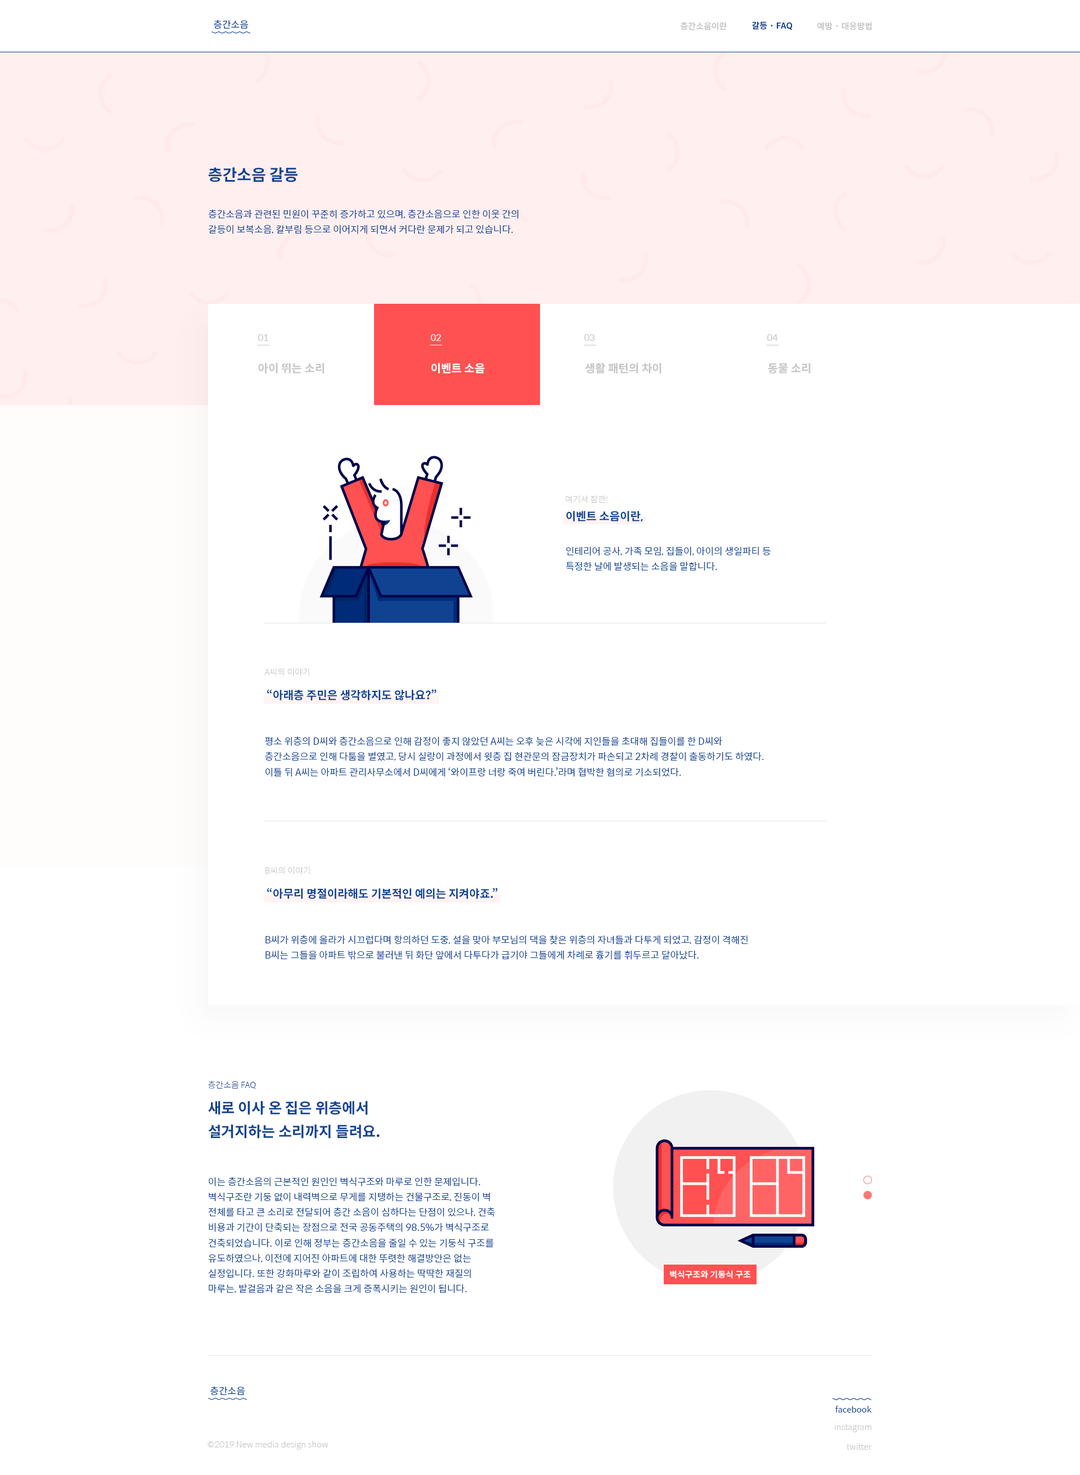
<style>
.page{position:relative;width:1080px;height:1475px;background:#ffffff}
.page>*{position:absolute;margin:0}
.t1{font:8.4px "SpoqaHanSans-Bold";color:#c5c5c5}
.t2{font:8.4px "SpoqaHanSans-Bold";color:#0f4392}
.t3{font:15.8px "SpoqaHanSans-Bold";color:#0f4392}
.t4{font:9.6px/15.3px "SpoqaHanSans-Regular";color:#0f4392}
.t5{font:9px "SpoqaHanSans-Regular";color:#c5c5c5}
.t6{font:9px "SpoqaHanSans-Regular";color:#ffffff}
.t7{font:11.2px "SpoqaHanSans-Bold";color:#c5c5c5}
.t8{font:11.2px "SpoqaHanSans-Bold";color:#ffffff}
.t9{font:8.4px "SpoqaHanSans-Light";color:#c5c5c5}
.t10{font:11.2px "SpoqaHanSans-Bold";color:#0f4392}
.t11{font:11.3px "SpoqaHanSans-Bold";color:#0f4392}
.t12{font:8.4px "SpoqaHanSans-Light";color:#0f4392}
.t13{font:14.6px/23.4px "SpoqaHanSans-Bold";color:#0f4392}
.t14{font:8.4px "SpoqaHanSans-Bold";color:#ffffff}
.t15{font:8.4px "SpoqaHanSans-Regular";color:#0f4392}
</style>
<div class="page">
<p class="t1" style="left:681px;top:22px;width:46px;height:8px">층간소음이란</p>
<p class="t2" style="left:752px;top:21px;width:41px;height:9px">갈등 · FAQ</p>
<p class="t1" style="left:817px;top:22px;width:55px;height:8px">예방 · 대응방법</p>
<p class="t3" style="left:208px;top:167px;width:90px;height:15px">층간소음 갈등</p>
<p class="t4" style="left:208px;top:209px;width:311px;height:25px">층간소음과 관련된 민원이 꾸준히 증가하고 있으며, 층간소음으로 인한 이웃 간의 갈등이 보복소음, 칼부림 등으로 이어지게 되면서 커다란 문제가 되고 있습니다.</p>
<p class="t5" style="left:258px;top:334px;width:10px;height:7px">01</p>
<p class="t6" style="left:430px;top:334px;width:11px;height:7px">02</p>
<p class="t5" style="left:584px;top:334px;width:11px;height:7px">03</p>
<p class="t5" style="left:767px;top:334px;width:11px;height:7px">04</p>
<p class="t7" style="left:258px;top:363px;width:66px;height:11px">아이 뛰는 소리</p>
<p class="t8" style="left:431px;top:363px;width:54px;height:11px">이벤트 소음</p>
<p class="t7" style="left:585px;top:363px;width:77px;height:11px">생활 패턴의 차이</p>
<p class="t7" style="left:768px;top:363px;width:43px;height:11px">동물 소리</p>
<p class="t9" style="left:565px;top:495px;width:43px;height:8px">여기서 잠깐!</p>
<p class="t10" style="left:566px;top:511px;width:77px;height:10px">이벤트 소음이란,</p>
<p class="t4" style="left:566px;top:547px;width:205px;height:24px">인테리어 공사, 가족 모임, 집들이, 아이의 생일파티 등<br>특정한 날에 발생되는 소음을 말합니다.</p>
<p class="t9" style="left:264px;top:668px;width:45px;height:8px">A씨의 이야기</p>
<p class="t11" style="left:267px;top:689px;width:169px;height:11px">“아래층 주민은 생각하지도 않나요?”</p>
<p class="t4" style="left:265px;top:736px;width:499px;height:41px">평소 위층의 D씨와 층간소음으로 인해 감정이 좋지 않았던 A씨는 오후 늦은 시각에 지인들을 초대해 집들이를 한 D씨와 층간소음으로 인해 다툼을 벌였고, 당시 실랑이 과정에서 윗층 집 현관문의 잠금장치가 파손되고 2차례 경찰이 출동하기도 하였다. 이틀 뒤 A씨는 아파트 관리사무소에서 D씨에게 ‘와이프랑 너랑 죽여 버린다.’라며 협박한 혐의로 기소되었다.</p>
<p class="t9" style="left:266px;top:866px;width:44px;height:8px">B씨의 이야기</p>
<p class="t11" style="left:267px;top:888px;width:231px;height:11px">“아무리 명절이라해도 기본적인 예의는 지켜야죠.”</p>
<p class="t4" style="left:266px;top:935px;width:482px;height:25px">B씨가 위층에 올라가 시끄럽다며 항의하던 도중, 설을 맞아 부모님의 댁을 찾은 위층의 자녀들과 다투게 되었고, 감정이 격해진<br>B씨는 그들을 아파트 밖으로 불러낸 뒤 화단 앞에서 다투다가 급기야 그들에게 차례로 흉기를 휘두르고 달아났다.</p>
<p class="t12" style="left:208px;top:1081px;width:48px;height:8px">층간소음 FAQ</p>
<p class="t13" style="left:208px;top:1101px;width:172px;height:37px">새로 이사 온 집은 위층에서<br>설거지하는 소리까지 들려요.</p>
<p class="t4" style="left:208px;top:1177px;width:287px;height:116px">이는 층간소음의 근본적인 원인인 벽식구조와 마루로 인한 문제입니다. 벽식구조란 기둥 없이 내력벽으로 무게를 지탱하는 건물구조로, 진동이 벽 전체를 타고 큰 소리로 전달되어 층간 소음이 심하다는 단점이 있으나, 건축 비용과 기간이 단축되는 장점으로 전국 공동주택의 98.5%가 벽식구조로 건축되었습니다. 이로 인해 정부는 층간소음을 줄일 수 있는 기둥식 구조를 유도하였으나, 이전에 지어진 아파트에 대한 뚜렷한 해결방안은 없는 실정입니다. 또한 강화마루와 같이 조립하여 사용하는 딱딱한 재질의 마루는, 발걸음과 같은 작은 소음을 크게 증폭시키는 원인이 됩니다.</p>
<p class="t14" style="left:670px;top:1270px;width:81px;height:9px">벽식구조와 기둥식 구조</p>
<p class="t15" style="left:835px;top:1406px;width:37px;height:6px">facebook</p>
<p class="t9" style="left:835px;top:1424px;width:36px;height:8px">instagram</p>
<p class="t9" style="left:208px;top:1441px;width:120px;height:9px">©2019 New media design show</p>
<p class="t9" style="left:847px;top:1443px;width:25px;height:7px">twitter</p>
</div>
